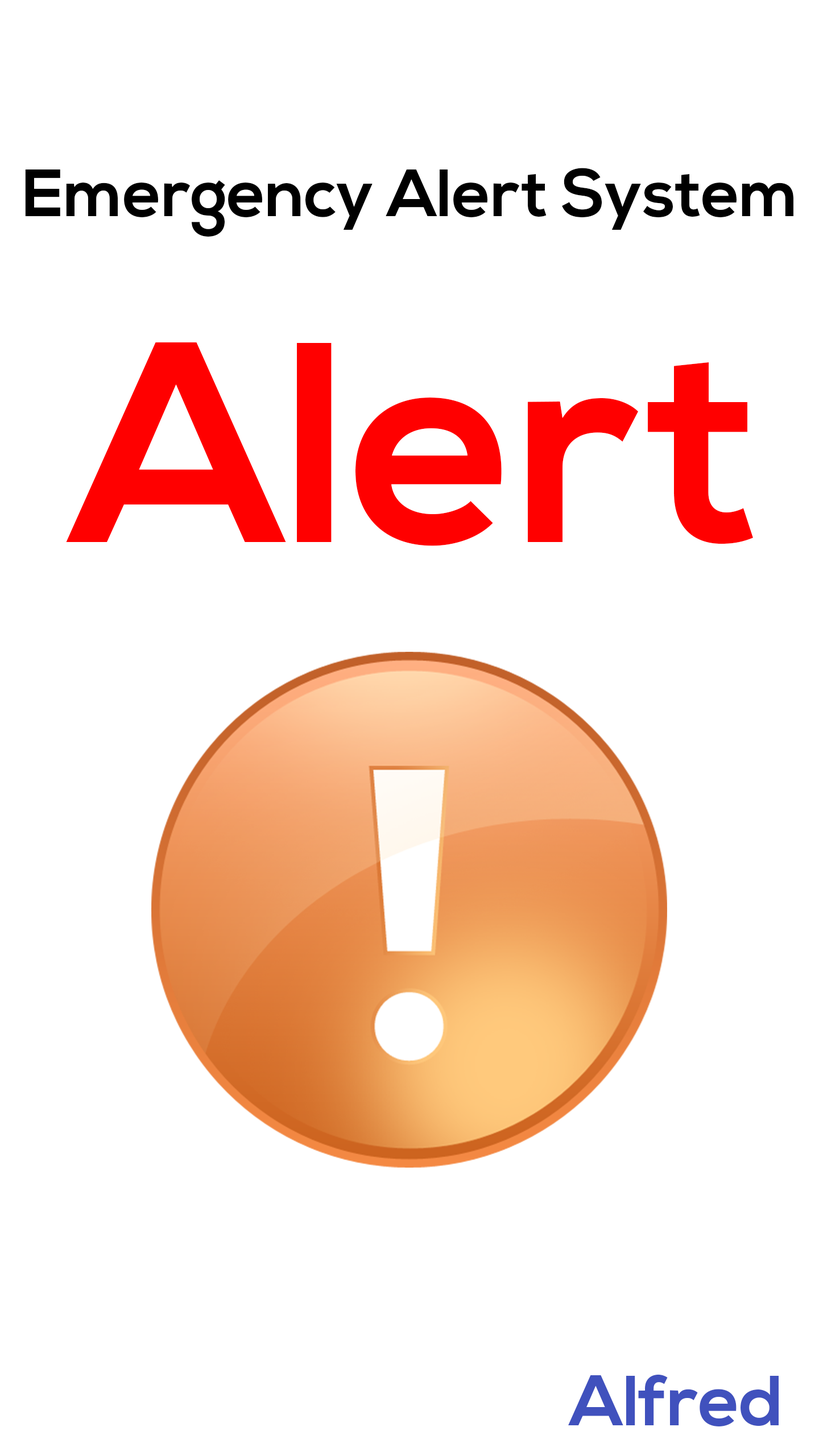
<style>
.page{position:relative;width:819px;height:1456px;background:#ffffff}
.page>*{position:absolute;margin:0}
.t1{font:66.4px "NexaBold";color:#000000}
.t2{font:284.4px "NexaBold";color:#ff0000}
.t3{font:71.1px "NexaBold";color:#4051bd}
</style>
<div class="page">
<p class="t1" style="left:25px;top:168px;width:768px;height:69px">Emergency Alert System</p>
<p class="t2" style="left:66px;top:342px;width:687px;height:204px">Alert</p>
<p class="t3" style="left:568px;top:1374px;width:211px;height:52px">Alfred</p>
</div>
